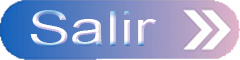
<style>
.page{position:relative;width:240px;height:60px}
.page>*{position:absolute;margin:0}
.t1{font:49px "ArialMT";scale:1.3 1}
</style>
<div class="page">
<p class="t1" style="left:30px;top:10px;width:127px;height:37px">Salir</p>
</div>
